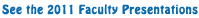
<style>
.page{position:relative;width:199px;height:18px;background:#ffffff}
.page>*{position:absolute;margin:0}
.t1{font:11px "HoboStd";letter-spacing:0.05em;color:#0b6bae}
</style>
<div class="page">
<p class="t1" style="left:2px;top:4px;width:196px;height:11px">See the 2011 Faculty Presentations</p>
</div>
